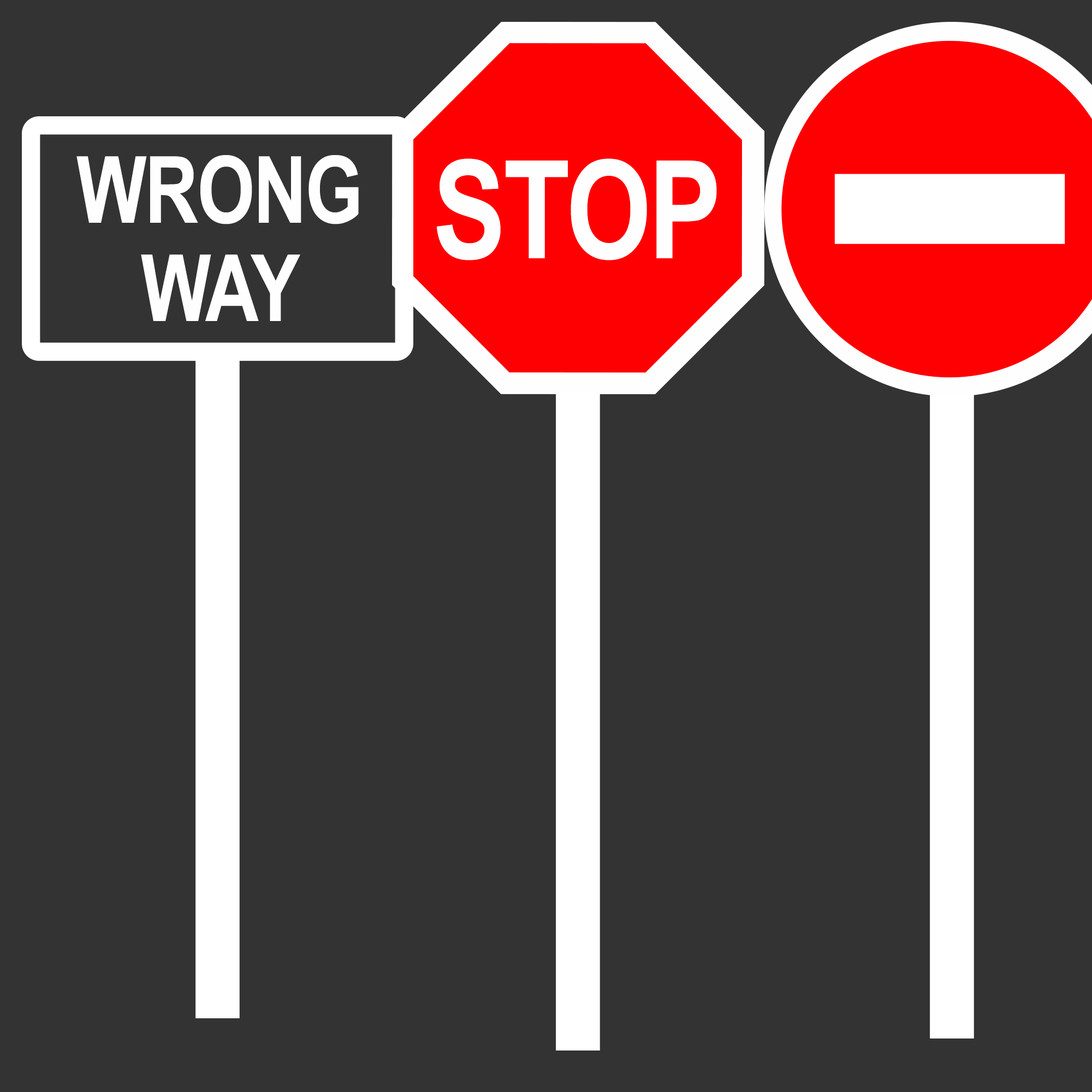
<style>
.page{position:relative;width:1092px;height:1092px;background:#333333}
.page>*{position:absolute;margin:0}
.t1{font:92.8px/98.3px "Arial-BoldMT";letter-spacing:-0.02em;color:#fefefe;scale:0.8 1}
.t2{font:136.6px "Arial-BoldMT";letter-spacing:-0.02em;color:#fefefe;scale:0.8 1}
</style>
<div class="page">
<p class="t1" style="left:76px;top:155px;width:283px;height:166px;text-align:justify">WRONG<br>WAY</p>
<p class="t2" style="left:437px;top:158px;width:280px;height:102px">STOP</p>
</div>
